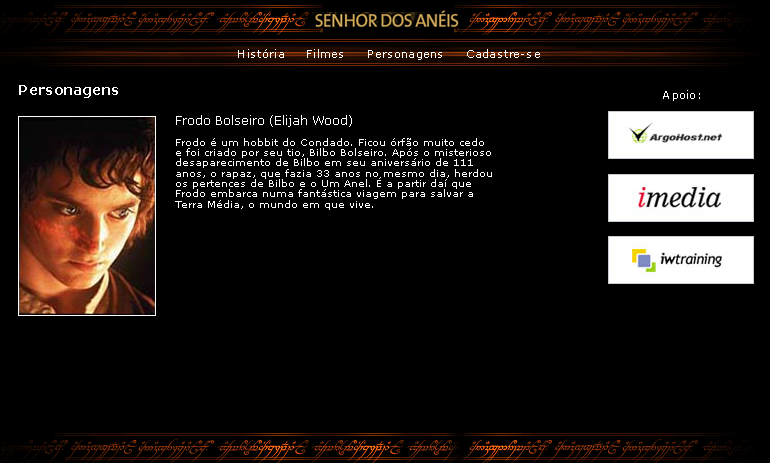
<style>
.page{position:relative;width:770px;height:463px;background:#000000}
.page>*{position:absolute;margin:0}
.t1{font:11px "Verdana";color:#ffffff}
.t2{font:14px "Verdana-Bold";color:#ffffff}
.t3{font:10.3px/10.3px "Verdana";color:#ffffff}
.t4{font:12px/10.3px "Verdana";color:#ffffff}
</style>
<div class="page">
<p class="t1" style="left:238px;top:49px;width:302px;height:11px">História      Filmes      Personagens      Cadastre-se</p>
<p class="t2" style="left:19px;top:85px;width:99px;height:13px">Personagens</p>
<p class="t1" style="left:663px;top:90px;width:37px;height:11px">Apoio:</p>
<p class="t3" style="left:175px;top:115px;width:317px;height:95px"><span class="t4">Frodo Bolseiro (Elijah Wood)<br></span><br>Frodo é um hobbit do Condado. Ficou órfão muito cedo e foi criado por seu tio, Bilbo Bolseiro. Após o misterioso desaparecimento de Bilbo em seu aniversário de 111 anos, o rapaz, que fazia 33 anos no mesmo dia, herdou os pertences de Bilbo e o Um Anel. É a partir daí que Frodo embarca numa fantástica viagem para salvar a Terra Média, o mundo em que vive.</p>
</div>
